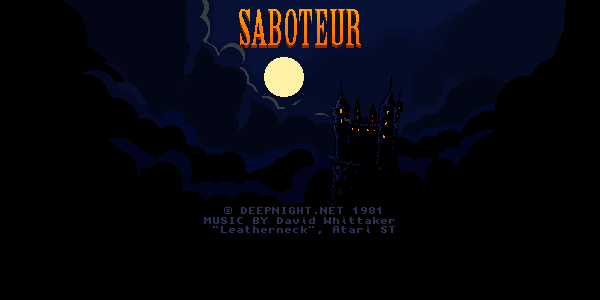
<style>
.page{position:relative;width:600px;height:300px;background:#000000}
.page>*{position:absolute;margin:0}
.t1{font:48px "BirchStd"}
.t2{font:8px "AmigaForever";color:#2b3153}
</style>
<div class="page">
<p class="t1" style="left:239px;top:9px;width:122px;height:36px">SABOTEUR</p>
<p class="t2" style="left:204px;top:207px;width:191px;height:27px;text-align:center">© DEEPNIGHT.NET 1981<br>MUSIC BY David Whittaker <br>"Leatherneck", Atari ST</p>
</div>
